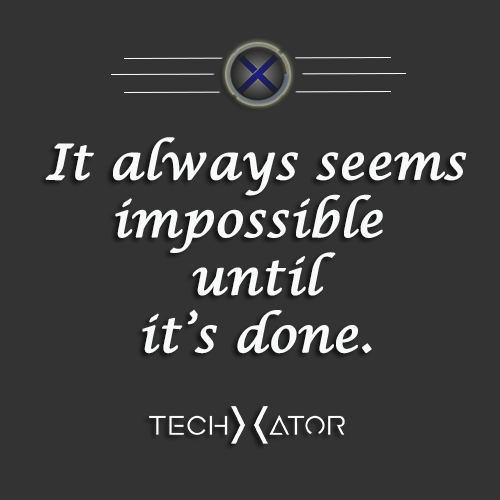
<style>
.page{position:relative;width:500px;height:500px;background:#333333}
.page>*{position:absolute;margin:0}
.t1{font:48px "LucidaCalligraphy-Italic";color:#f8f9fa;font-weight:bold}
</style>
<div class="page">
<p class="t1" style="left:45px;top:137px;width:422px;height:217px;text-align:center">It always seems<br>impossible <br>until<br>it’s done.</p>
</div>
